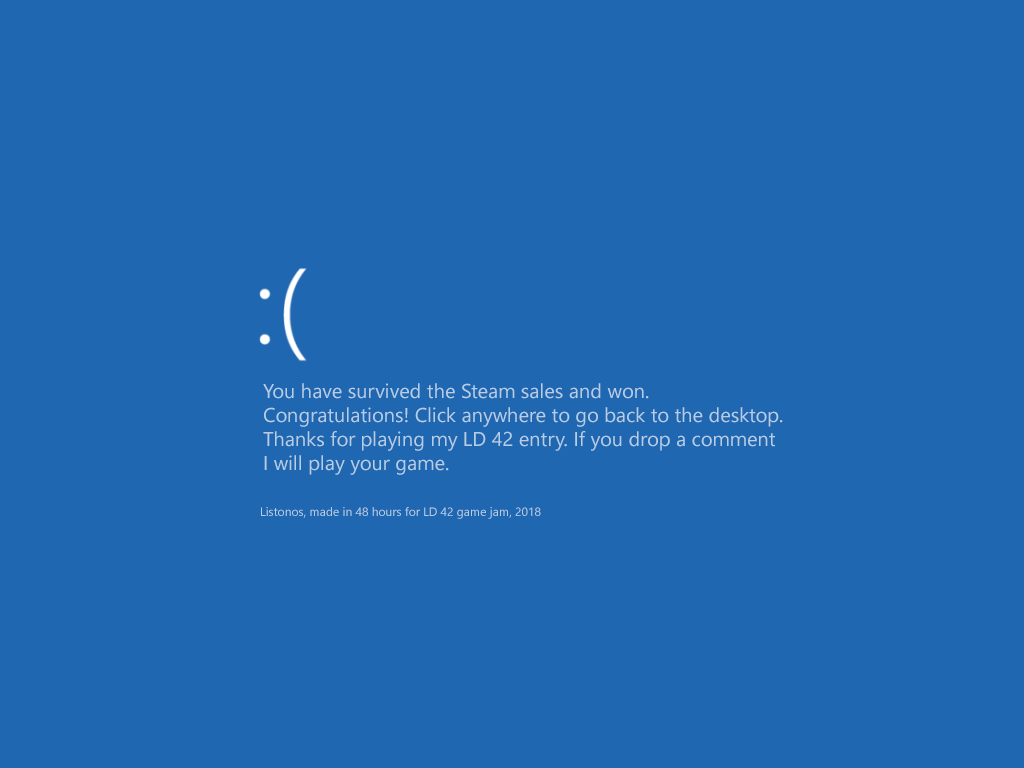
<style>
.page{position:relative;width:1024px;height:768px;background:#2067b2}
.page>*{position:absolute;margin:0}
.t1{font:20px "NirmalaUI";color:#b5cde5}
.t2{font:12px "NirmalaUI";color:#b5cde5}
</style>
<div class="page">
<p class="t1" style="left:263px;top:383px;width:520px;height:92px">You have survived the Steam sales and won.<br>Congratulations! Click anywhere to go back to the desktop.<br>Thanks for playing my LD 42 entry. If you drop a comment<br>I will play your game.</p>
<p class="t2" style="left:261px;top:507px;width:280px;height:12px">Listonos, made in 48 hours for LD 42 game jam, 2018</p>
</div>
